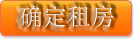
<style>
.page{position:relative;width:134px;height:39px}
.page>*{position:absolute;margin:0}
.t1{font:24px "SimSun";color:#f2efef}
</style>
<div class="page">
<p class="t1" style="left:19px;top:5px;width:95px;height:23px">确定租房</p>
</div>
